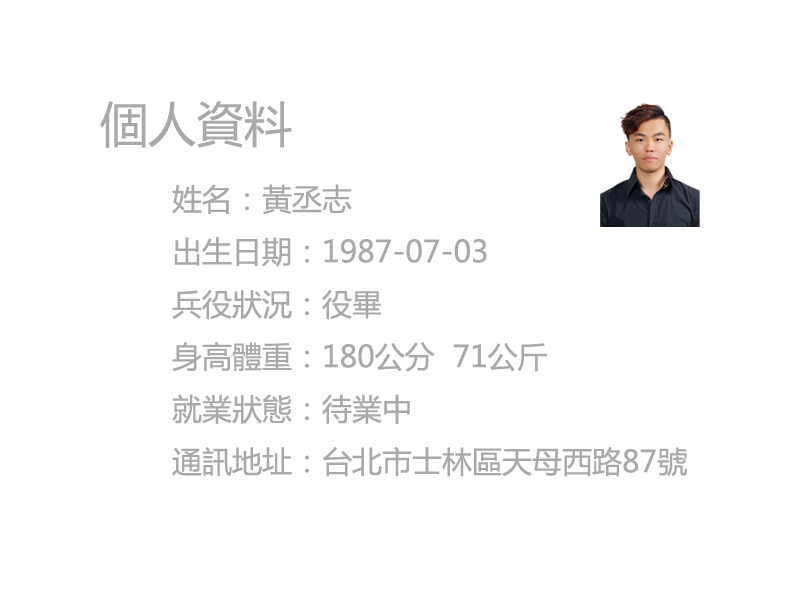
<style>
.page{position:relative;width:800px;height:600px;background:#ffffff}
.page>*{position:absolute;margin:0}
.t1{font:30px "MicrosoftYaHei";color:#a9a9a9}
.t2{font:48px "MicrosoftYaHei";color:#a9a9a9}
</style>
<div class="page">
<p class="t1" style="left:100px;top:101px;width:587px;height:376px"><span class="t2">個人資料<br></span>  姓名：黃丞志<br>  出生日期：1987-07-03<br>  兵役狀況：役畢<br>  身高體重：180公分  71公斤<br>  就業狀態：待業中<br>  通訊地址：台北市士林區天母西路87號</p>
</div>
